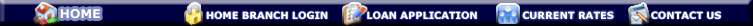
<style>
.page{position:relative;width:753px;height:26px;background:#000040}
.page>*{position:absolute;margin:0}
.t1{font:12px "Verdana-Bold";letter-spacing:0.025em;color:#ffffff}
.t2{font:10px "Verdana-Bold";letter-spacing:-0.01em;color:#ffffff}
</style>
<div class="page">
<p class="t1" style="left:60px;top:9px;width:40px;height:10px">HOME</p>
<p class="t2" style="left:206px;top:11px;width:122px;height:8px">HOME BRANCH LOGIN</p>
<p class="t2" style="left:367px;top:11px;width:110px;height:8px">LOAN APPLICATION</p>
<p class="t2" style="left:522px;top:11px;width:92px;height:8px">CURRENT RATES</p>
<p class="t2" style="left:651px;top:11px;width:70px;height:8px">CONTACT US</p>
</div>
